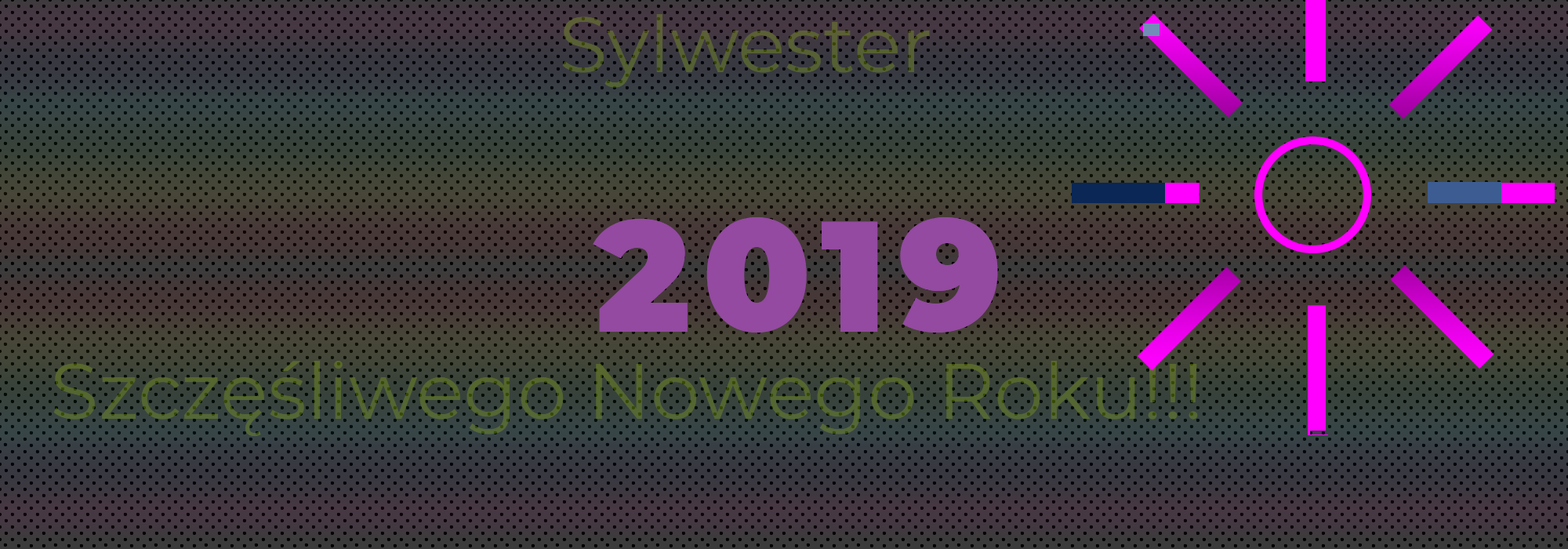
<style>
.page{position:relative;width:1568px;height:549px}
.page>*{position:absolute;margin:0}
.t1{font:78.4px "Montserrat-Regular";color:#566034}
.t2{font:156.8px "Montserrat-Black";letter-spacing:0.075em;color:#934aa0}
.t3{font:78.4px "Montserrat-Regular";color:#546630}
</style>
<div class="page">
<p class="t1" style="left:562px;top:14px;width:368px;height:74px">Sylwester</p>
<p class="t2" style="left:593px;top:217px;width:405px;height:115px">2019</p>
<p class="t3" style="left:53px;top:361px;width:1145px;height:75px">Szczęśliwego Nowego Roku!!!</p>
</div>
